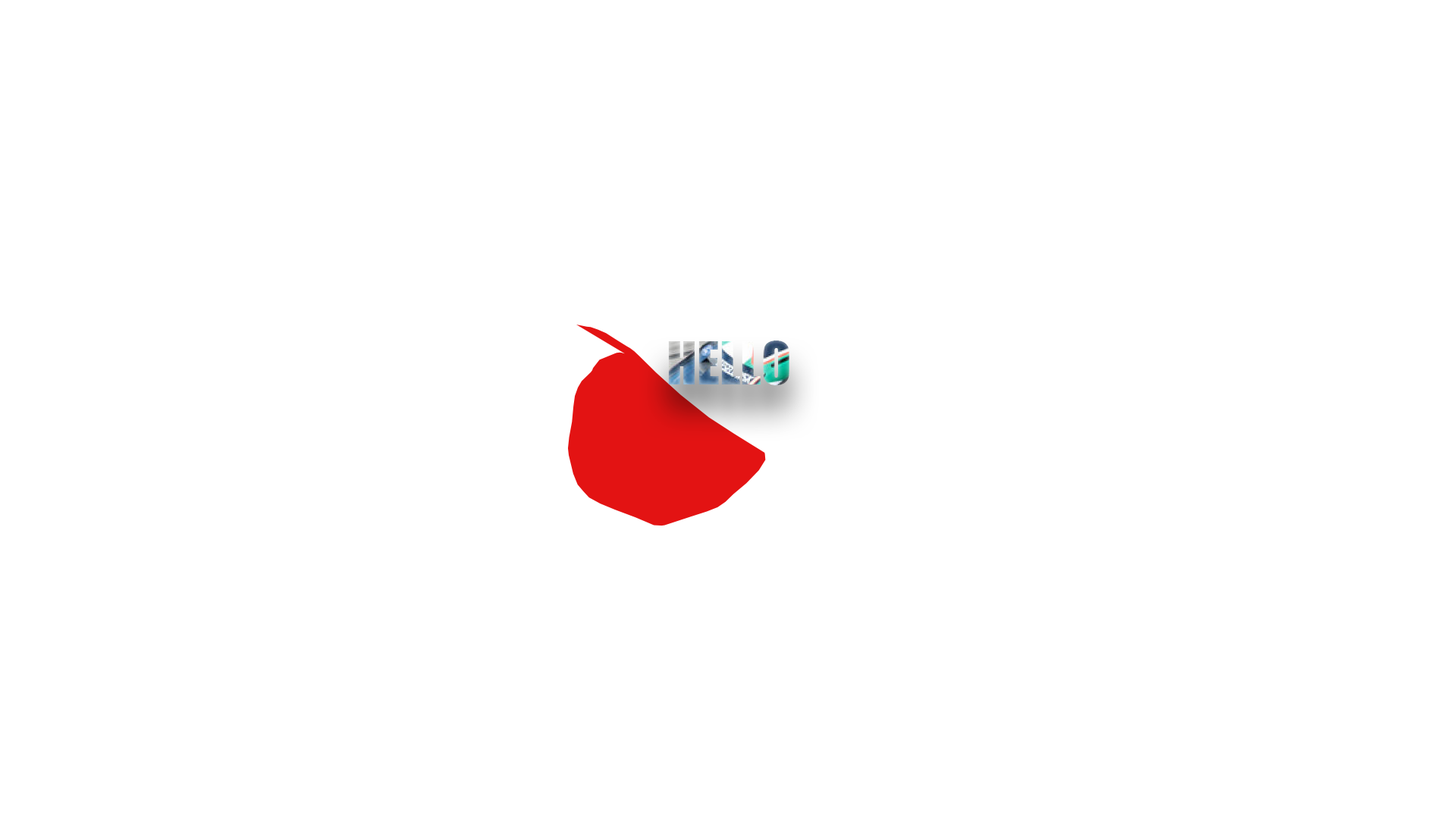
<style>
.page{position:relative;width:1456px;height:819px;background:#ffffff}
.page>*{position:absolute;margin:0}
.t1{font:54.6px "Impact"}
</style>
<div class="page">
<p class="t1" style="left:668px;top:340px;width:121px;height:45px">HELLO</p>
</div>
